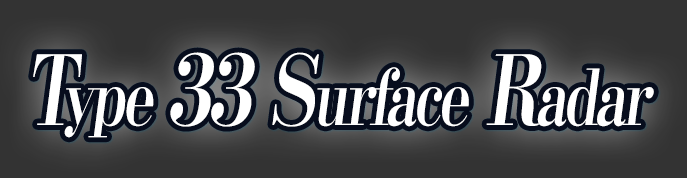
<style>
.page{position:relative;width:687px;height:178px;background:#333333}
.page>*{position:absolute;margin:0}
.t1{font:76.8px "KochoStd-Heavy";letter-spacing:-0.06em;color:#ffffff;font-style:italic;scale:0.75 1}
.t2{font:96px "KochoStd-Heavy";letter-spacing:-0.06em;color:#ffffff;font-style:italic;scale:0.75 1}
</style>
<div class="page">
<p class="t1" style="left:33px;top:52px;width:621px;height:86px"><span class="t2">T</span>ype <span class="t2">33 S</span>urface<span class="t2"> R</span>adar</p>
</div>
